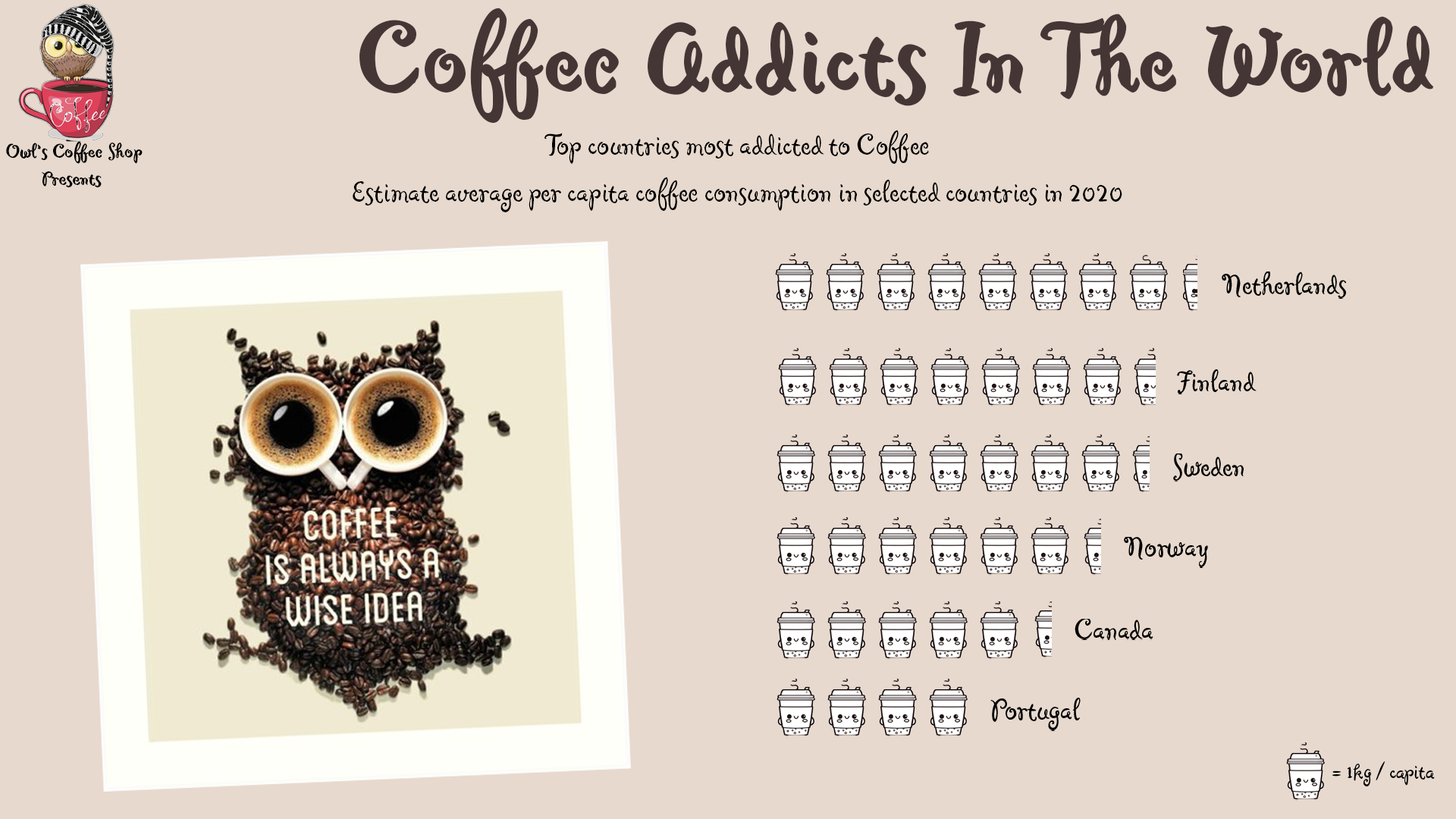
<style>
.page{position:relative;width:1456px;height:819px;background:#e7d9ce}
.page>*{position:absolute;margin:0}
.t1{font:131.6px "CafeMimiMVB-Bold";color:#453636}
.t2{font:39.2px "CafeMimiMVB-Regular";color:#000000}
.t3{font:25.2px "CafeMimiMVB-Bold";color:#000000}
</style>
<div class="page">
<p class="t1" style="left:359px;top:8px;width:1075px;height:115px">Coffee Addicts In The World</p>
<p class="t2" style="left:353px;top:130px;width:769px;height:82px;text-align:center">Top countries most addicted to Coffee <br>Estimate average per capita coffee consumption in selected countries in 2020</p>
<p class="t3" style="left:6px;top:141px;width:137px;height:23px">Owl’s Coffee Shop</p>
<p class="t3" style="left:41px;top:171px;width:61px;height:16px">Presents</p>
<p class="t2" style="left:1222px;top:271px;width:124px;height:27px">Netherlands</p>
<p class="t2" style="left:1177px;top:369px;width:80px;height:25px">Finland</p>
<p class="t2" style="left:1173px;top:453px;width:71px;height:28px">Sweden</p>
<p class="t2" style="left:1124px;top:536px;width:84px;height:31px">Norway</p>
<p class="t2" style="left:1075px;top:619px;width:78px;height:21px">Canada</p>
<p class="t2" style="left:990px;top:698px;width:91px;height:33px">Portugal</p>
</div>
